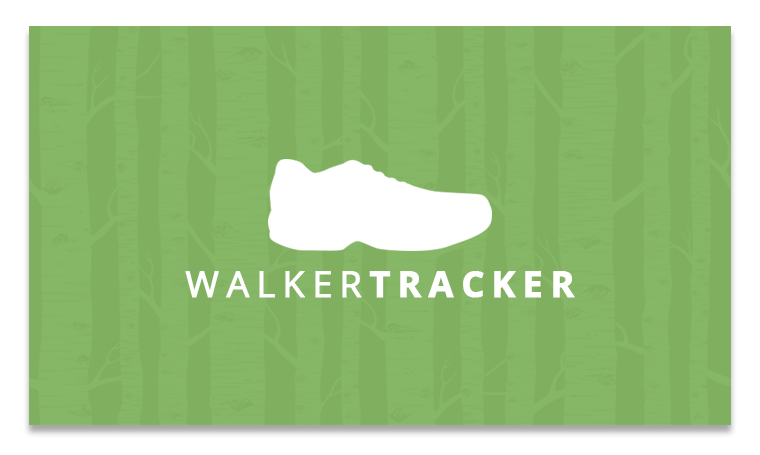
<style>
.page{position:relative;width:760px;height:455px;background:#86b766}
.page>*{position:absolute;margin:0}
.t1{font:36px "OpenSans-Bold";letter-spacing:0.18em;color:#ffffff;text-transform:uppercase;font-weight:bold}
.t2{font:36px "OpenSans";letter-spacing:0.18em;color:#ffffff;text-transform:uppercase;font-weight:bold}
</style>
<div class="page">
<p class="t1" style="left:185px;top:271px;width:390px;height:27px"><span class="t2">WALKER</span>TRACKER</p>
</div>
